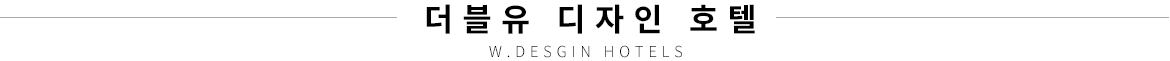
<style>
.page{position:relative;width:1170px;height:61px;background:#ffffff}
.page>*{position:absolute;margin:0}
.t1{font:31.7px "NotoSansCJKkr-Bold";letter-spacing:0.3em;color:#000000}
.t2{font:15px "NotoSansCJKkr-Light";letter-spacing:0.3em;color:#000000}
</style>
<div class="page">
<p class="t1" style="left:426px;top:4px;width:329px;height:30px">더블유 디자인 호텔</p>
<p class="t2" style="left:489px;top:45px;width:193px;height:13px">W.DESGIN HOTELS</p>
</div>
